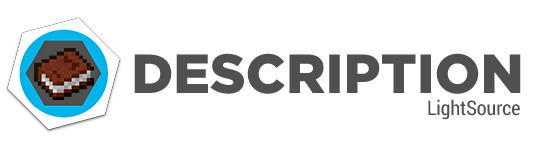
<style>
.page{position:relative;width:540px;height:150px;background:#ffffff}
.page>*{position:absolute;margin:0}
.t1{font:55px "GothamPro-Black";color:#505050}
.t2{font:20px "RobotoCondensed-Regular";color:#505050}
</style>
<div class="page">
<p class="t1" style="left:134px;top:53px;width:387px;height:41px">DESCRIPTION</p>
<p class="t2" style="left:428px;top:99px;width:92px;height:21px">LightSource</p>
</div>
